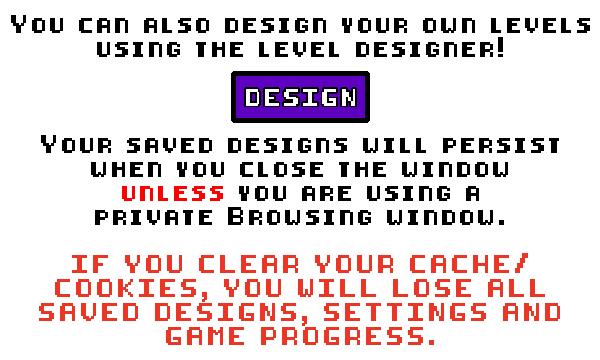
<style>
.page{position:relative;width:600px;height:360px;background:#ffffff}
.page>*{position:absolute;margin:0}
.t1{font:15px/24px "8-bit-pusab";letter-spacing:0.2em;color:#000000}
.t2{font:15px/24px "8-bit-pusab";letter-spacing:0.2em;color:#ff0000}
.t3{font:15px/24px "8-bit-pusab";letter-spacing:0.2em;color:#eb3626}
</style>
<div class="page">
<p class="t1" style="left:11px;top:15px;width:579px;height:330px;text-align:center">You can also design your own levels<br>using the level designer!<br><br><br><br>Your saved designs will persist<br>when you close the window<br><span class="t2">unless </span>you are using a<br>private Browsing window.<br><span class="t3"><br>IF YOU CLEAR YOUR CACHE/<br>COOKIES, YOU WILL LOSE ALL<br>SAVED DESIGNS, SETTINGS AND<br>GAME PROGRESS.</span></p>
</div>
